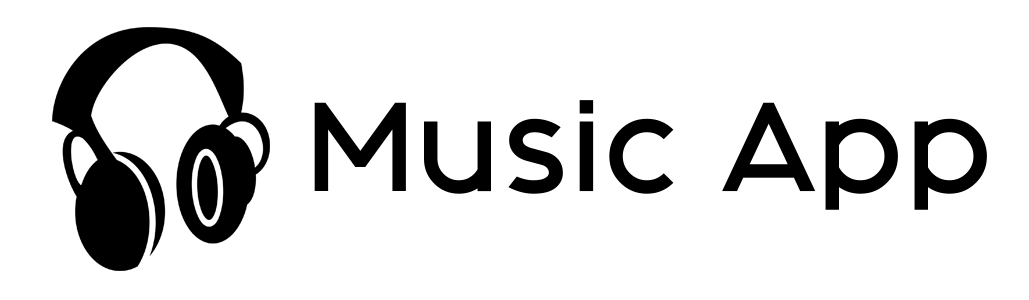
<style>
.page{position:relative;width:1029px;height:300px;background:#ffffff}
.page>*{position:absolute;margin:0}
.t1{font:106.9px "FashionFetish";color:#000000}
</style>
<div class="page">
<p class="t1" style="left:314px;top:100px;width:673px;height:110px">Music App</p>
</div>
